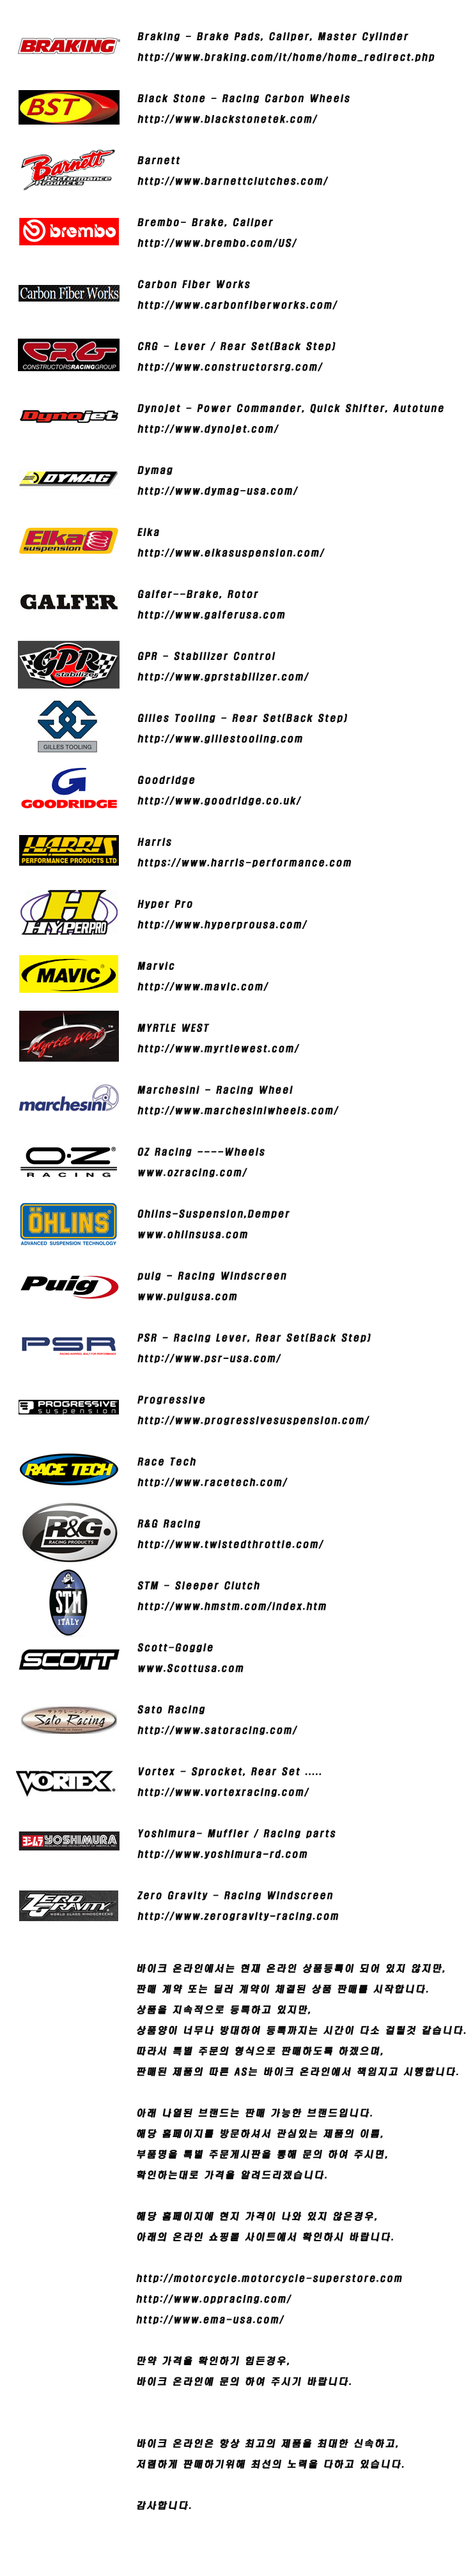
<style>
.page{position:relative;width:473px;height:2576px;background:#ffffff}
.page>*{position:absolute;margin:0}
.t1{font:8.9px/20.7px "H2hdrM";letter-spacing:0.15em;color:#0b0b0b;font-weight:bold;font-style:italic}
</style>
<div class="page">
<p class="t1" style="left:137px;top:32px;width:306px;height:1889px">Braking - Brake Pads, Caliper, Master Cylinder<br>http://www.braking.com/it/home/home_redirect.php<br><br>Black Stone - Racing Carbon Wheels<br>http://www.blackstonetek.com/<br><br>Barnett<br>http://www.barnettclutches.com/<br><br>Brembo- Brake, Caliper<br>http://www.brembo.com/US/<br><br>Carbon Fiber Works<br>http://www.carbonfiberworks.com/<br><br>CRG - Lever / Rear Set(Back Step)<br>http://www.constructorsrg.com/<br><br>Dynojet - Power Commander, Quick Shifter, Autotune<br>http://www.dynojet.com/<br><br>Dymag<br>http://www.dymag-usa.com/<br><br>Elka<br>http://www.elkasuspension.com/<br><br>Galfer--Brake, Rotor<br>http://www.galferusa.com<br><br>GPR - Stabilizer Control<br>http://www.gprstabilizer.com/<br><br>Gilles Tooling - Rear Set(Back Step)<br>http://www.gillestooling.com<br><br>Goodridge<br>http://www.goodridge.co.uk/<br><br>Harris<br>https://www.harris-performance.com<br><br>Hyper Pro<br>http://www.hyperprousa.com/<br><br>Marvic<br>http://www.mavic.com/<br><br>MYRTLE WEST<br>http://www.myrtlewest.com/<br><br>Marchesini - Racing Wheel<br>http://www.marchesiniwheels.com/<br><br>OZ Racing ----Wheels<br>www.ozracing.com/<br><br>Ohlins-Suspension,Demper <br>www.ohlinsusa.com<br><br>puig - Racing Windscreen<br>www.puigusa.com<br><br>PSR - Racing Lever, Rear Set(Back Step)<br>http://www.psr-usa.com/<br><br>Progressive<br>http://www.progressivesuspension.com/<br><br>Race Tech<br>http://www.racetech.com/<br><br>R&amp;G Racing<br>http://www.twistedthrottle.com/<br><br>STM - Sleeper Clutch<br>http://www.hmstm.com/index.htm<br><br>Scott-Goggle<br>www.Scottusa.com<br><br>Sato Racing<br>http://www.satoracing.com/<br><br>Vortex - Sprocket, Rear Set ..... <br>http://www.vortexracing.com/<br><br>Yoshimura- Muffler / Racing parts<br>http://www.yoshimura-rd.com<br><br>Zero Gravity - Racing Windscreen<br>http://www.zerogravity-racing.com</p>
<p class="t1" style="left:136px;top:1964px;width:330px;height:546px">바이크 온라인에서는 현재 온라인 상품등록이 되어 있지 않지만, <br>판매 계약 또는 딜러 계약이 체결된 상품 판매를 시작합니다.<br>상품을 지속적으로 등록하고 있지만, <br>상품양이 너무나 방대하여 등록까지는 시간이 다소 걸릴것 같습니다.<br>따라서 특별 주문의 형식으로 판매하도록 하겠으며,<br>판매된 제품의 따른 AS는 바이크 온라인에서 책임지고 시행합니다.<br><br>아래 나열된 브랜드는 판매 가능한 브랜드입니다.<br>해당 홈페이지를 방문하셔서 관심있는 제품의 이름, <br>부품명을 특별 주문게시판을 통해 문의 하여 주시면, <br>확인하는대로 가격을 알려드리겠습니다.<br><br>해당 홈페이지에 현지 가격이 나와 있지 않은경우, <br>아래의 온라인 쇼핑몰 사이트에서 확인하시 바랍니다.<br><br>http://motorcycle.motorcycle-superstore.com<br>http://www.oppracing.com/<br>http://www.ema-usa.com/<br><br>만약 가격을 확인하기 힘든경우, <br>바이크 온라인에 문의 하여 주시기 바랍니다.<br><br><br>바이크 온라인은 항상 최고의 제품을 최대한 신속하고, <br>저렴하게 판매하기위해 최선의 노력을 다하고 있습니다.<br><br>감사합니다.</p>
</div>
